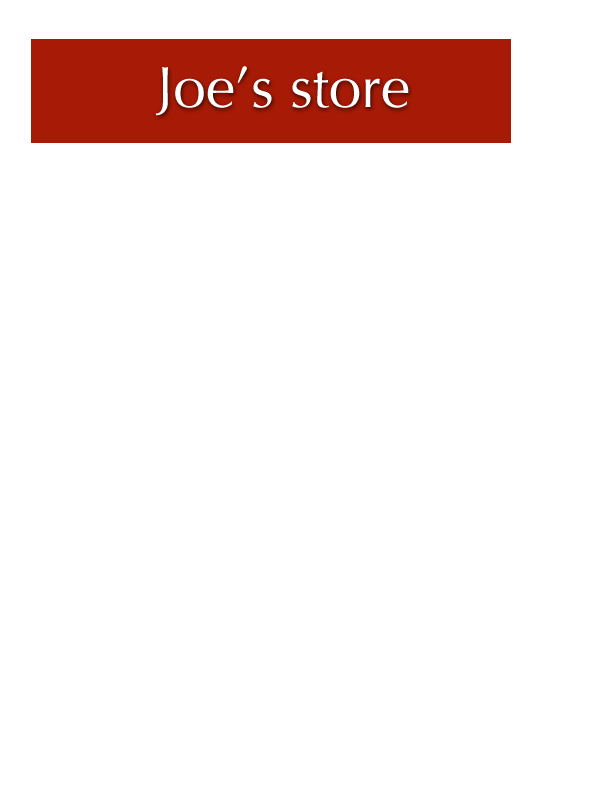
<style>
.page{position:relative;width:600px;height:800px;background:#ffffff}
.page>*{position:absolute;margin:0}
.t1{font:58.3px "Optima-Regular";color:#ffffff}
</style>
<div class="page">
<p class="t1" style="left:155px;top:66px;width:254px;height:50px">Joe’s store</p>
</div>
